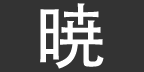
<style>
.page{position:relative;width:144px;height:72px;background:#333333}
.page>*{position:absolute;margin:0}
.t1{font:72px "AdobeHeitiStd-Regular";color:#ffffff}
</style>
<div class="page">
<p class="t1" style="left:40px;top:3px;width:64px;height:66px">暁</p>
</div>
